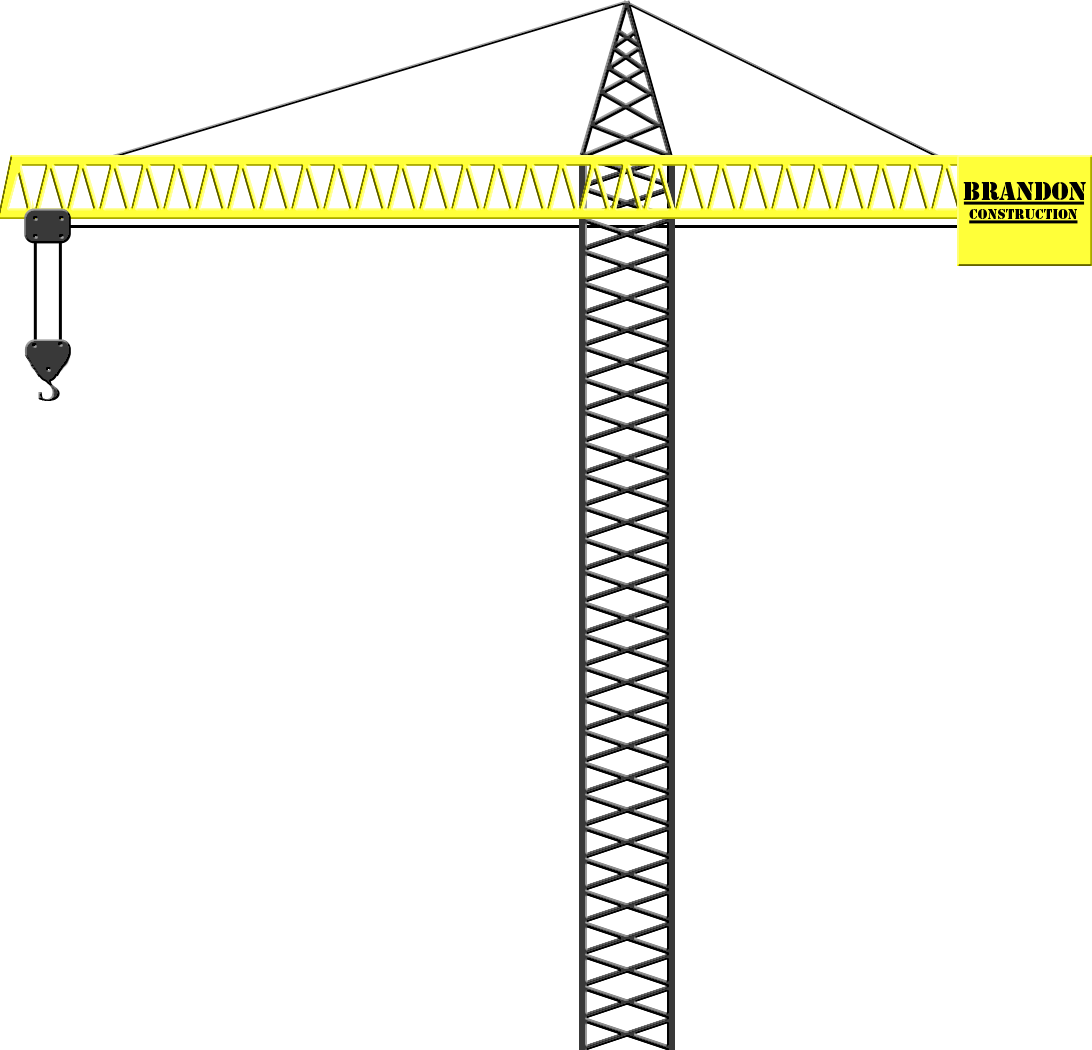
<style>
.page{position:relative;width:1092px;height:1050px;background:#ffffff}
.page>*{position:absolute;margin:0}
.t1{font:24px "StencilStd";color:#000000}
.t2{font:13.3px "StencilStd";color:#000000}
</style>
<div class="page">
<p class="t1" style="left:963px;top:182px;width:123px;height:18px">Brandon</p>
<p class="t2" style="left:969px;top:209px;width:108px;height:10px">construction</p>
</div>
